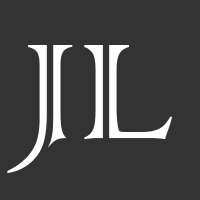
<style>
.page{position:relative;width:200px;height:200px;background:#333333}
.page>*{position:absolute;margin:0}
.t1{font:179.7px "ColonnaMT";color:#ffffff}
</style>
<div class="page">
<p class="t1" style="left:7px;top:45px;width:165px;height:128px">JL</p>
</div>
